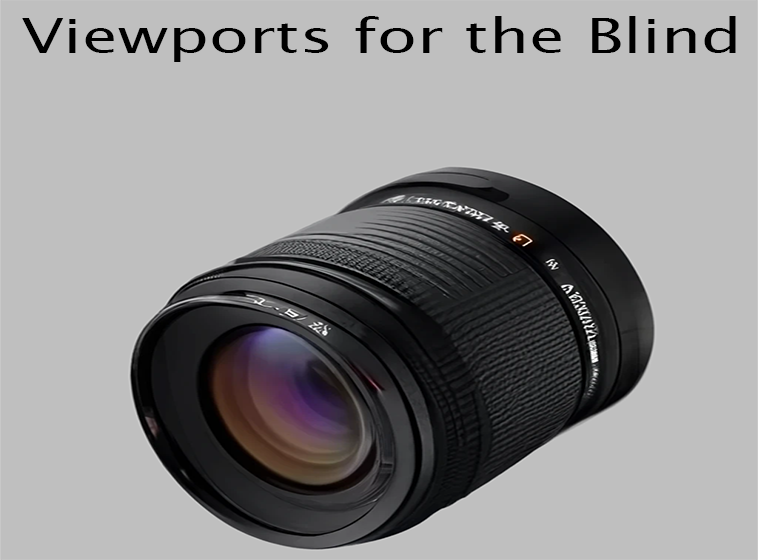
<style>
.page{position:relative;width:758px;height:560px;background:#bfbfbf}
.page>*{position:absolute;margin:0}
.t1{font:48px "LucidaSans";color:#000000;scale:1.35 1}
</style>
<div class="page">
<p class="t1" style="left:22px;top:16px;width:714px;height:46px">Viewports for the Blind</p>
</div>
